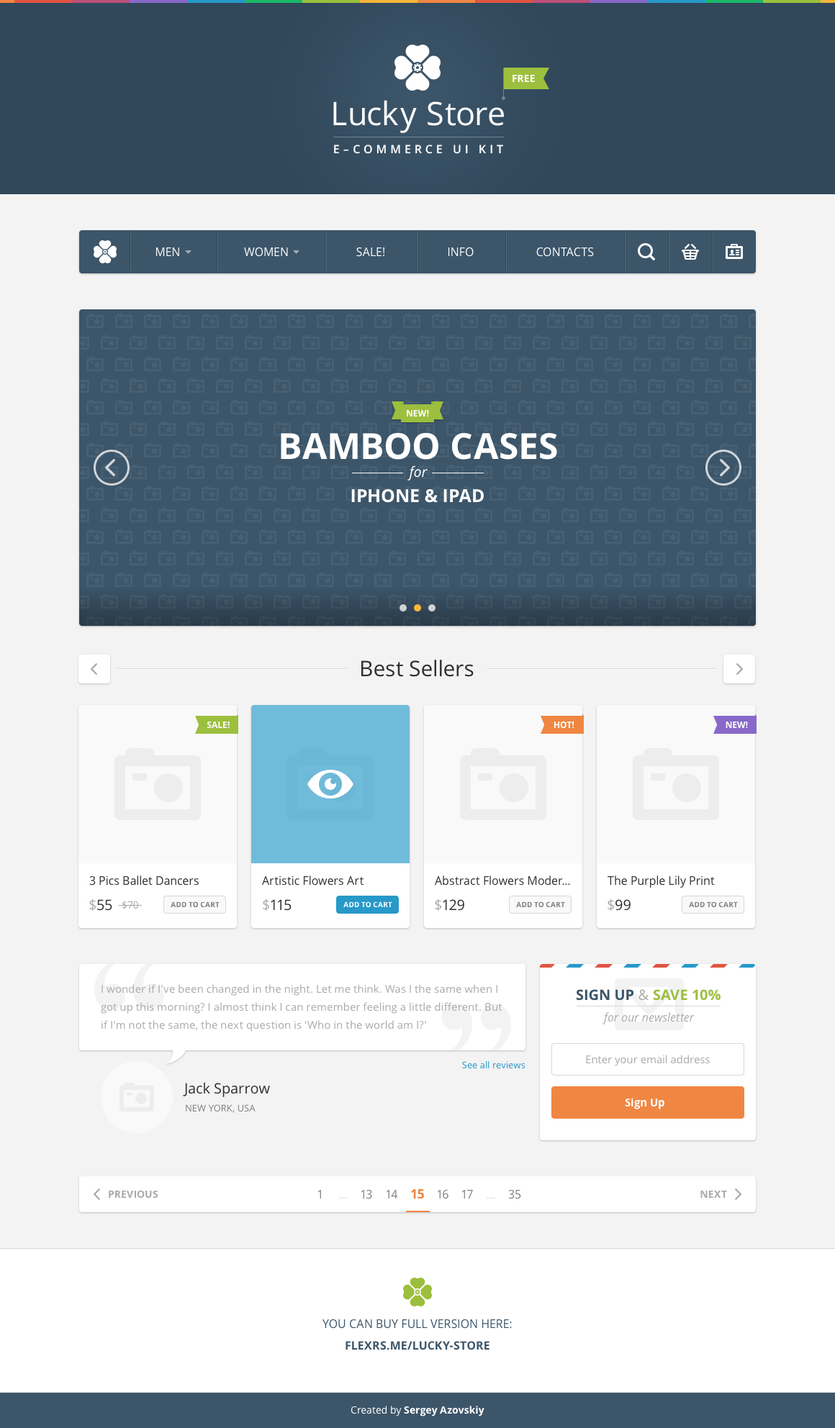
<style>
.page{position:relative;width:835px;height:1428px;background:#f3f3f3}
.page>*{position:absolute;margin:0}
.t1{font:10.1px "OpenSans-Bold";color:#ffffff;text-transform:uppercase}
.t2{font:32.4px "OpenSans";letter-spacing:0.01em;color:#ffffff}
.t3{font:11.5px "OpenSans-Semibold";letter-spacing:0.31em;color:#ffffff;text-transform:uppercase}
.t4{font:11.5px "OpenSans";color:#ffffff;text-transform:uppercase}
.t5{font:8.6px "OpenSans-Bold";color:#ffffff;text-transform:uppercase}
.t6{font:36px "OpenSans-Bold";color:#ffffff;text-transform:uppercase}
.t7{font:14.4px "OpenSans-Italic";color:#ffffff}
.t8{font:18px "OpenSans-Bold";color:#ffffff;text-transform:uppercase}
.t9{font:21.6px "OpenSans";color:#303030}
.t10{font:11.5px "OpenSans";color:#303030}
.t11{font:14.4px "OpenSans";color:#303030}
.t12{font:14.4px "OpenSans";color:#aaaaaa}
.t13{font:10.1px "OpenSans";color:#aaaaaa}
.t14{font:7.2px "OpenSans-Bold";color:#808080;text-transform:uppercase}
.t15{font:7.2px "OpenSans-Bold";color:#ffffff;text-transform:uppercase}
.t16{font:10.8px/18px "OpenSans";color:#aaaaaa}
.t17{font:14.4px "OpenSans-Bold";color:#3c5569;text-transform:uppercase}
.t18{font:14.4px "OpenSans";color:#aaaaaa;text-transform:uppercase}
.t19{font:14.4px "OpenSans-Bold";color:#9cbf3e;text-transform:uppercase}
.t20{font:11.5px "OpenSans-Italic";color:#aaaaaa}
.t21{font:9.4px "OpenSans";color:#2799c9}
.t22{font:10.8px "OpenSans";color:#aaaaaa}
.t23{font:9.4px "OpenSans";color:#808080;text-transform:uppercase}
.t24{font:10.8px "OpenSans-Bold";color:#ffffff}
.t25{font:10.1px "OpenSans-Bold";color:#aaaaaa;text-transform:uppercase}
.t26{font:11.5px "OpenSans";color:#808080}
.t27{font:13px "OpenSans-Bold";color:#ef8742}
.t28{font:11.5px "OpenSans";color:#d7d7d7}
.t29{font:11.5px "OpenSans";color:#3c5569;text-transform:uppercase}
.t30{font:11.5px "OpenSans-Bold";color:#3c5569;text-transform:uppercase}
.t31{font:10.1px "OpenSans-Bold";color:#ffffff}
.t32{font:10.1px "OpenSans";color:#ffffff}
</style>
<div class="page">
<p class="t1" style="left:512px;top:75px;width:23px;height:7px">Free</p>
<p class="t2" style="left:333px;top:100px;width:171px;height:33px">Lucky Store</p>
<p class="t3" style="left:334px;top:145px;width:169px;height:9px">E–commerce ui Kit</p>
<p class="t4" style="left:155px;top:248px;width:24px;height:8px">Men</p>
<p class="t4" style="left:244px;top:247px;width:44px;height:10px">Women</p>
<p class="t4" style="left:356px;top:247px;width:28px;height:10px">Sale!</p>
<p class="t4" style="left:448px;top:247px;width:26px;height:10px">Info</p>
<p class="t4" style="left:536px;top:247px;width:58px;height:10px">Contacts</p>
<p class="t5" style="left:407px;top:410px;width:22px;height:7px">New!</p>
<p class="t6" style="left:281px;top:432px;width:276px;height:28px">Bamboo Cases</p>
<p class="t7" style="left:407px;top:466px;width:20px;height:15px">for</p>
<p class="t8" style="left:351px;top:489px;width:133px;height:14px">iPhone &amp; iPad</p>
<p class="t9" style="left:361px;top:660px;width:113px;height:17px">Best Sellers</p>
<p class="t5" style="left:207px;top:721px;width:23px;height:8px">Sale!</p>
<p class="t5" style="left:554px;top:721px;width:20px;height:8px">Hot!</p>
<p class="t5" style="left:725px;top:722px;width:23px;height:7px">New!</p>
<p class="t10" style="left:89px;top:876px;width:110px;height:10px">3 Pics Ballet Dancers</p>
<p class="t10" style="left:262px;top:876px;width:101px;height:10px">Artistic Flowers Art</p>
<p class="t10" style="left:435px;top:876px;width:135px;height:10px">Abstract Flowers Moder...</p>
<p class="t10" style="left:607px;top:876px;width:108px;height:12px">The Purple Lily Print</p>
<p class="t11" style="left:89px;top:899px;width:23px;height:13px"><span class="t12">$</span>55</p>
<p class="t13" style="left:122px;top:901px;width:16px;height:9px">$70</p>
<p class="t14" style="left:171px;top:902px;width:48px;height:6px">Add to Cart</p>
<p class="t11" style="left:263px;top:899px;width:28px;height:13px"><span class="t12">$</span>115</p>
<p class="t15" style="left:343px;top:902px;width:49px;height:6px">Add to Cart</p>
<p class="t11" style="left:435px;top:899px;width:29px;height:13px"><span class="t12">$</span>129</p>
<p class="t14" style="left:516px;top:902px;width:49px;height:6px">Add to Cart</p>
<p class="t11" style="left:607px;top:899px;width:23px;height:13px"><span class="t12">$</span>99</p>
<p class="t14" style="left:689px;top:902px;width:49px;height:6px">Add to Cart</p>
<p class="t16" style="left:101px;top:984px;width:401px;height:48px">I wonder if I've been changed in the night. Let me think. Was I the same when I got up this morning? I almost think I can remember feeling a little different. But if I'm not the same, the next question is 'Who in the world am I?'</p>
<p class="t17" style="left:576px;top:989px;width:58px;height:12px">Sign Up</p>
<p class="t18" style="left:638px;top:989px;width:10px;height:12px">&amp;</p>
<p class="t19" style="left:653px;top:989px;width:67px;height:12px">Save 10%</p>
<p class="t20" style="left:602px;top:1013px;width:92px;height:12px">for our newsletter</p>
<p class="t21" style="left:462px;top:1061px;width:63px;height:8px">See all reviews</p>
<p class="t22" style="left:586px;top:1055px;width:124px;height:11px">Enter your email address</p>
<p class="t11" style="left:183px;top:1082px;width:87px;height:15px">Jack Sparrow</p>
<p class="t23" style="left:186px;top:1105px;width:69px;height:8px">New York, USA</p>
<p class="t24" style="left:625px;top:1098px;width:39px;height:12px">Sign Up</p>
<p class="t25" style="left:109px;top:1190px;width:49px;height:9px">Previous</p>
<p class="t26" style="left:317px;top:1190px;width:4px;height:9px">1</p>
<p class="t26" style="left:361px;top:1190px;width:11px;height:10px">13</p>
<p class="t26" style="left:386px;top:1190px;width:12px;height:9px">14</p>
<p class="t27" style="left:411px;top:1190px;width:13px;height:10px">15</p>
<p class="t26" style="left:437px;top:1190px;width:11px;height:10px">16</p>
<p class="t26" style="left:461px;top:1190px;width:12px;height:9px">17</p>
<p class="t26" style="left:508px;top:1190px;width:13px;height:10px">35</p>
<p class="t25" style="left:700px;top:1191px;width:27px;height:7px">Next</p>
<p class="t28" style="left:338px;top:1197px;width:8px;height:3px">...</p>
<p class="t28" style="left:486px;top:1197px;width:8px;height:3px">...</p>
<p class="t29" style="left:322px;top:1319px;width:190px;height:10px">You can buy full version here:</p>
<p class="t30" style="left:345px;top:1341px;width:144px;height:10px">flexrs.me/lucky-store</p>
<p class="t31" style="left:350px;top:1406px;width:134px;height:11px"><span class="t32">Created by </span>Sergey Azovskiy</p>
</div>
